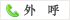
<style>
.page{position:relative;width:70px;height:20px;background:#ffffff}
.page>*{position:absolute;margin:0}
.t1{font:12px "STZhongsong";color:#434242}
</style>
<div class="page">
<p class="t1" style="left:24px;top:4px;width:36px;height:12px">外   呼</p>
</div>
